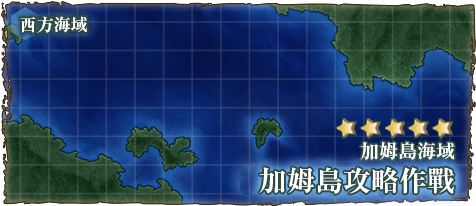
<style>
.page{position:relative;width:476px;height:206px}
.page>*{position:absolute;margin:0}
.t1{font:17px "RyuminPr6N-ExBold";color:#ffffff}
.t2{font:19px "RyuminPro-ExBold";color:#ffffff}
.t3{font:28px "RyuminPro-ExBold";color:#ffffff}
</style>
<div class="page">
<p class="t1" style="left:20px;top:16px;width:67px;height:17px">西方海域</p>
<p class="t2" style="left:360px;top:141px;width:95px;height:19px">加姆島海域</p>
<p class="t3" style="left:259px;top:167px;width:196px;height:27px">加姆島攻略作戰</p>
</div>
